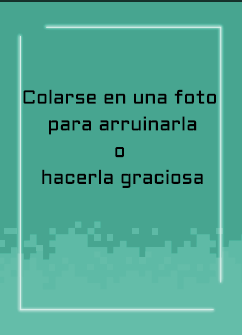
<style>
.page{position:relative;width:242px;height:335px;background:#47a590}
.page>*{position:absolute;margin:0}
.t1{font:19.2px/26.7px "Aldrich-Regular";letter-spacing:0.005em;color:#000000}
</style>
<div class="page">
<p class="t1" style="left:23px;top:89px;width:193px;height:99px;text-align:center">Colarse en una foto <br>para arruinarla<br>o <br>hacerla graciosa</p>
</div>
